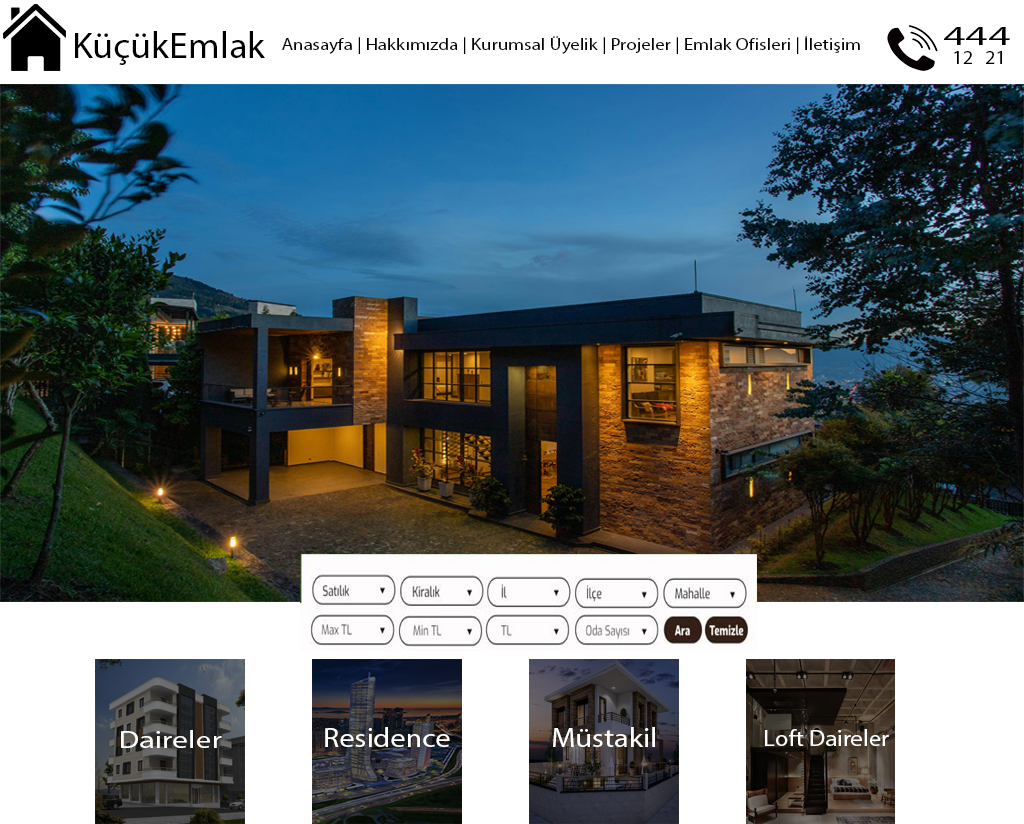
<style>
.page{position:relative;width:1024px;height:824px;background:#ffffff}
.page>*{position:absolute;margin:0}
.t1{font:26.8px "MyriadPro-Regular";color:#000000;scale:1.64 1}
.t2{font:37px "MyriadPro-Regular";color:#000000;scale:1.03 1}
.t3{font:16.6px "MyriadPro-Regular";color:#000000;scale:1.14 1}
.t4{font:19.8px "MyriadPro-Regular";color:#000000;scale:1.04 1}
.t5{font:24.9px "MyriadPro-Regular";color:#ffffff;scale:1.27 1}
.t6{font:27.1px "MyriadPro-Regular";color:#ffffff;scale:1.11 1}
.t7{font:22.9px "MyriadPro-Regular";color:#ffffff;scale:1.07 1}
</style>
<div class="page">
<p class="t1" style="left:944px;top:27px;width:66px;height:18px">444</p>
<p class="t2" style="left:75px;top:31px;width:191px;height:34px">KüçükEmlak</p>
<p class="t3" style="left:282px;top:36px;width:578px;height:18px">Anasayfa | Hakkımızda | Kurumsal Üyelik | Projeler | Emlak Ofisleri | İletişim</p>
<p class="t4" style="left:954px;top:51px;width:18px;height:13px">12</p>
<p class="t4" style="left:986px;top:51px;width:16px;height:13px">21</p>
<p class="t5" style="left:121px;top:730px;width:101px;height:18px">Daireler</p>
<p class="t6" style="left:325px;top:727px;width:125px;height:20px">Residence</p>
<p class="t6" style="left:553px;top:727px;width:102px;height:20px">Müstakil</p>
<p class="t7" style="left:765px;top:729px;width:124px;height:17px">Loft Daireler</p>
</div>
